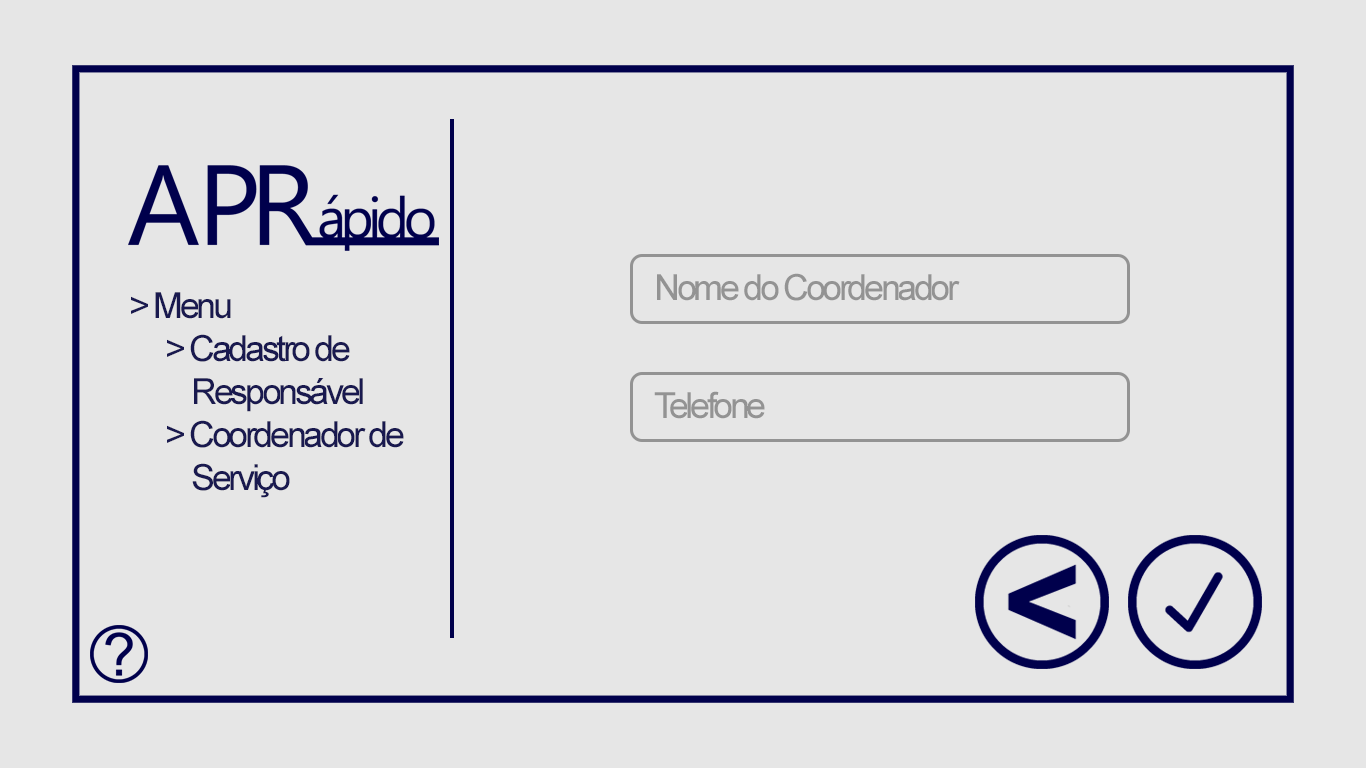
<style>
.page{position:relative;width:1366px;height:768px;background:#e6e6e6}
.page>*{position:absolute;margin:0}
.t1{font:36px "ArialMT";letter-spacing:-0.095em;color:#939393}
.t2{font:36px "ArialMT";letter-spacing:-0.095em;color:#19194f}
</style>
<div class="page">
<p class="t1" style="left:657px;top:273px;width:303px;height:28px">Nome do Coordenador</p>
<p class="t2" style="left:131px;top:292px;width:273px;height:206px">&gt; Menu<br> &gt; Cadastro de <br>     Responsável<br> &gt; Coordenador de <br>     Serviço</p>
<p class="t1" style="left:654px;top:391px;width:111px;height:28px">Telefone</p>
</div>
